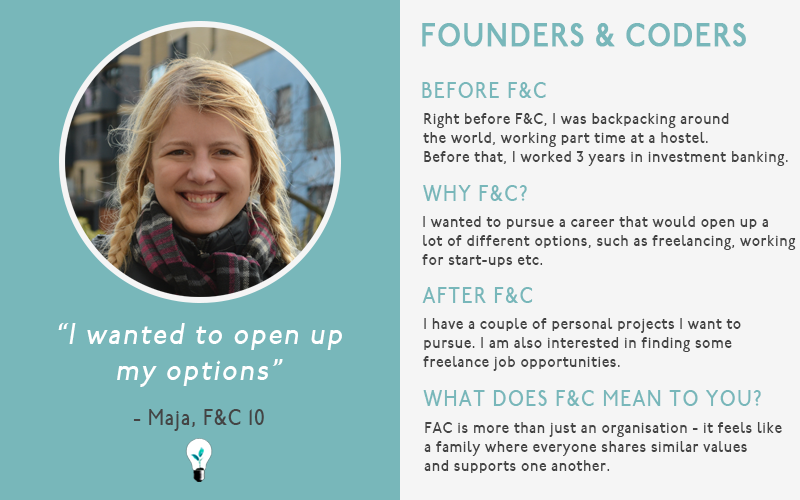
<style>
.page{position:relative;width:800px;height:500px;background:#f5f5f5}
.page>*{position:absolute;margin:0}
.t1{font:32px "P22UndergroundMedium";letter-spacing:0.05em;color:#78b7ba;font-weight:bold;scale:0.86 1}
.t2{font:22px "P22UndergroundMedium";letter-spacing:0.075em;color:#78b7ba;scale:0.86 1}
.t3{font:16px "P22UndergroundMedium";letter-spacing:0.05em;color:#444444;scale:0.86 1}
.t4{font:30px "P22UndergroundMedium";letter-spacing:0.075em;color:#ffffff;font-style:italic;scale:0.86 1}
.t5{font:22px "P22UndergroundMedium";letter-spacing:0.05em;color:#444444;scale:0.86 1}
</style>
<div class="page">
<p class="t1" style="left:422px;top:23px;width:324px;height:24px">FOUNDERS &amp; CODERS</p>
<p class="t2" style="left:422px;top:82px;width:124px;height:16px">BEFORE F&amp;C</p>
<p class="t3" style="left:423px;top:113px;width:365px;height:53px">Right before F&amp;C, I was backpacking around <br>the world, working part time at a hostel. <br>Before that, I worked 3 years in investment banking.</p>
<p class="t2" style="left:423px;top:185px;width:104px;height:16px">WHY F&amp;C?</p>
<p class="t3" style="left:422px;top:216px;width:374px;height:51px">I wanted to pursue a career that would open up a <br>lot of different options, such as freelancing, working <br>for start-ups etc.</p>
<p class="t2" style="left:422px;top:287px;width:111px;height:16px">AFTER F&amp;C</p>
<p class="t3" style="left:423px;top:318px;width:318px;height:53px">I have a couple of personal projects I want to <br>pursue. I am also interested in finding some <br>freelance job opportunities.</p>
<p class="t4" style="left:58px;top:323px;width:284px;height:64px;text-align:center">“I wanted to open up<br>my options”</p>
<p class="t2" style="left:423px;top:390px;width:338px;height:16px">WHAT DOES F&amp;C MEAN TO YOU?</p>
<p class="t5" style="left:133px;top:409px;width:131px;height:22px">- Maja, F&amp;C 10</p>
<p class="t3" style="left:424px;top:422px;width:358px;height:51px">FAC is more than just an organisation - it feels like <br>a family where everyone shares similar values <br>and supports one another.</p>
</div>
